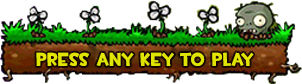
<style>
.page{position:relative;width:302px;height:84px;background:#ffffff}
.page>*{position:absolute;margin:0}
.t1{font:18.5px "TF2Build";letter-spacing:0.025em;color:#e1e401;scale:0.95 1}
</style>
<div class="page">
<p class="t1" style="left:36px;top:52px;width:218px;height:14px">Press Any Key to Play</p>
</div>
